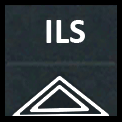
<style>
.page{position:relative;width:122px;height:122px}
.page>*{position:absolute;margin:0}
.t1{font:36px "Calibri-Bold";color:#ffffff}
</style>
<div class="page">
<p class="t1" style="left:46px;top:20px;width:39px;height:23px">ILS</p>
</div>
